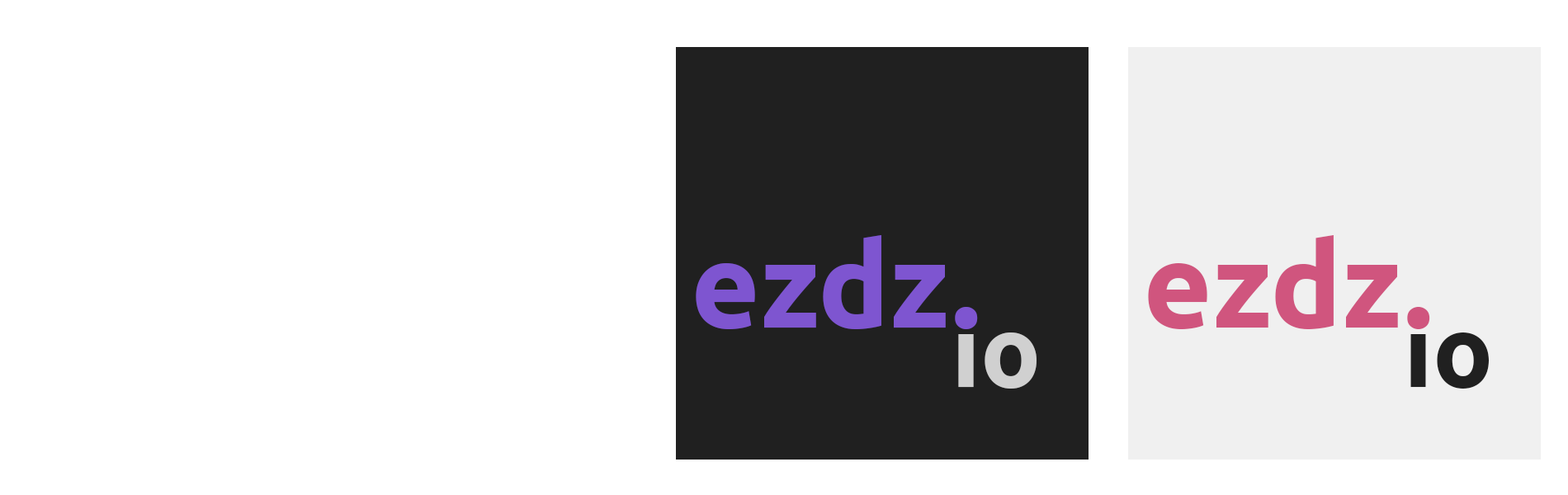
<style>
.page{position:relative;width:1568px;height:495px;background:#ffffff}
.page>*{position:absolute;margin:0}
.t1{font:118.8px "Ubuntu-Bold";color:#7e55d0}
.t2{font:118.8px "Ubuntu-Bold";color:#d0557e}
.t3{font:99.9px "Ubuntu-Bold";color:#d0d0d0}
.t4{font:99.9px "Ubuntu-Bold";color:#202020}
</style>
<div class="page">
<p class="t1" style="left:696px;top:235px;width:282px;height:94px">ezdz.</p>
<p class="t2" style="left:1148px;top:235px;width:282px;height:94px">ezdz.</p>
<p class="t3" style="left:956px;top:309px;width:81px;height:80px">io</p>
<p class="t4" style="left:1409px;top:309px;width:80px;height:80px">io</p>
</div>
